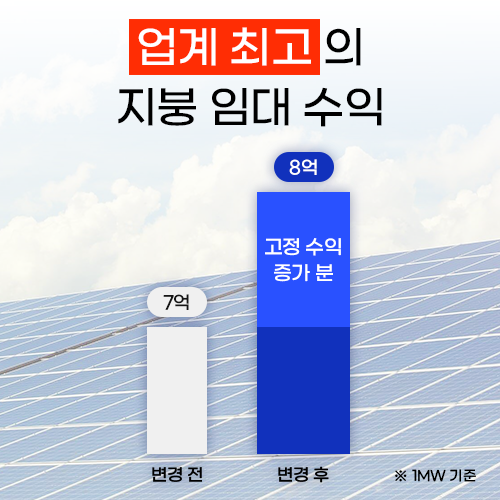
<style>
.page{position:relative;width:500px;height:500px}
.page>*{position:absolute;margin:0}
.t1{font:44px/60px "GmarketSansMedium";letter-spacing:-0.025em;color:#000000}
.t2{font:44px/60px "GmarketSansMedium";letter-spacing:-0.025em;color:#ffffff}
.t3{font:18px "GmarketSansMedium";letter-spacing:-0.025em;color:#ffffff}
.t4{font:19.6px/26.2px "GmarketSansMedium";letter-spacing:-0.025em;color:#ffffff}
.t5{font:18px "GmarketSansMedium";letter-spacing:-0.025em;color:#151515}
.t6{font:17px "GmarketSansMedium";letter-spacing:-0.025em;color:#000000}
.t7{font:14px "GmarketSansMedium";letter-spacing:-0.025em;color:#000000}
</style>
<div class="page">
<p class="t1" style="left:118px;top:27px;width:264px;height:100px;text-align:center"><span class="t2">업계 최고 </span>의<br>지붕 임대 수익</p>
<p class="t3" style="left:289px;top:159px;width:28px;height:16px">8억</p>
<p class="t4" style="left:265px;top:238px;width:76px;height:44px;text-align:center">고정 수익<br>증가 분</p>
<p class="t5" style="left:163px;top:294px;width:26px;height:16px">7억</p>
<p class="t6" style="left:152px;top:467px;width:50px;height:15px">변경 전</p>
<p class="t6" style="left:278px;top:466px;width:51px;height:17px">변경 후</p>
<p class="t7" style="left:395px;top:469px;width:81px;height:13px">※ 1MW 기준</p>
</div>
